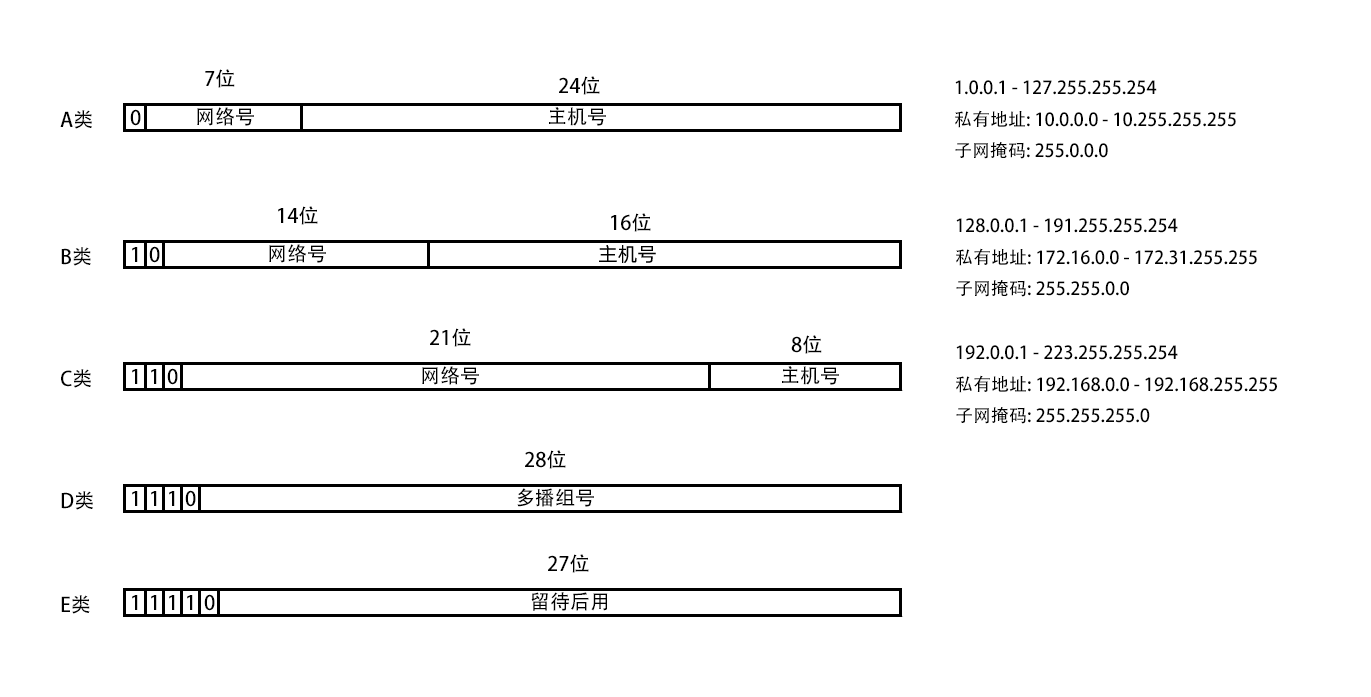
<style>
.page{position:relative;width:1371px;height:697px;background:#ffffff}
.page>*{position:absolute;margin:0}
.t1{font:20px "AdobeHeitiStd-Regular";color:#000000}
.t2{font:18px "AdobeHeitiStd-Regular";color:#000000}
.t3{font:20px "Alibaba-PuHuiTi-R";color:#000000}
</style>
<div class="page">
<p class="t1" style="left:205px;top:69px;width:30px;height:19px">7位</p>
<p class="t1" style="left:559px;top:76px;width:41px;height:19px">24位</p>
<p class="t2" style="left:955px;top:80px;width:281px;height:79px">1.0.0.1 - 127.255.255.254<br>私有地址: 10.0.0.0 - 10.255.255.255<br>子网掩码: 255.0.0.0</p>
<p class="t1" style="left:60px;top:110px;width:32px;height:19px">A类</p>
<p class="t1" style="left:130px;top:109px;width:11px;height:17px">0</p>
<p class="t1" style="left:197px;top:107px;width:57px;height:19px">网络号</p>
<p class="t1" style="left:549px;top:107px;width:57px;height:19px">主机号</p>
<p class="t1" style="left:278px;top:206px;width:40px;height:19px">14位</p>
<p class="t1" style="left:611px;top:213px;width:40px;height:19px">16位</p>
<p class="t2" style="left:956px;top:218px;width:301px;height:79px">128.0.0.1 - 191.255.255.254<br>私有地址: 172.16.0.0 - 172.31.255.255<br>子网掩码: 255.255.0.0</p>
<p class="t1" style="left:149px;top:246px;width:11px;height:17px">0</p>
<p class="t1" style="left:269px;top:244px;width:57px;height:19px">网络号</p>
<p class="t3" style="left:599px;top:245px;width:57px;height:18px">主机号</p>
<p class="t1" style="left:61px;top:247px;width:30px;height:19px">B类</p>
<p class="t1" style="left:132px;top:247px;width:6px;height:15px">1</p>
<p class="t1" style="left:430px;top:328px;width:41px;height:19px">21位</p>
<p class="t1" style="left:791px;top:335px;width:31px;height:19px">8位</p>
<p class="t2" style="left:956px;top:345px;width:321px;height:79px">192.0.0.1 - 223.255.255.254<br>私有地址: 192.168.0.0 - 192.168.255.255<br>子网掩码: 255.255.255.0</p>
<p class="t1" style="left:422px;top:366px;width:57px;height:19px">网络号</p>
<p class="t1" style="left:782px;top:366px;width:57px;height:19px">主机号</p>
<p class="t1" style="left:61px;top:369px;width:30px;height:19px">C类</p>
<p class="t1" style="left:132px;top:369px;width:6px;height:15px">1</p>
<p class="t1" style="left:151px;top:369px;width:6px;height:15px">1</p>
<p class="t1" style="left:167px;top:368px;width:11px;height:17px">0</p>
<p class="t1" style="left:525px;top:450px;width:41px;height:19px">28位</p>
<p class="t1" style="left:61px;top:491px;width:32px;height:19px">D类</p>
<p class="t1" style="left:132px;top:491px;width:6px;height:15px">1</p>
<p class="t1" style="left:151px;top:491px;width:6px;height:15px">1</p>
<p class="t1" style="left:169px;top:491px;width:6px;height:15px">1</p>
<p class="t1" style="left:185px;top:490px;width:11px;height:17px">0</p>
<p class="t1" style="left:517px;top:488px;width:77px;height:19px">多播组号</p>
<p class="t1" style="left:548px;top:554px;width:41px;height:19px">27位</p>
<p class="t1" style="left:531px;top:592px;width:77px;height:19px">留待后用</p>
<p class="t1" style="left:61px;top:595px;width:29px;height:19px">E类</p>
<p class="t1" style="left:132px;top:595px;width:6px;height:15px">1</p>
<p class="t1" style="left:151px;top:595px;width:6px;height:15px">1</p>
<p class="t1" style="left:169px;top:595px;width:6px;height:15px">1</p>
<p class="t1" style="left:187px;top:595px;width:6px;height:15px">1</p>
<p class="t1" style="left:204px;top:594px;width:11px;height:17px">0</p>
</div>
